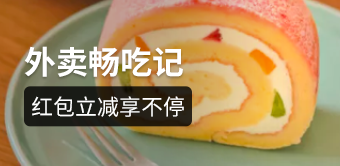
<style>
.page{position:relative;width:340px;height:166px}
.page>*{position:absolute;margin:0}
.t1{font:32px "SourceHanSansCN-Bold";color:#ffffff}
.t2{font:22px "SourceHanSansCN-Regular";color:#ffffff}
</style>
<div class="page">
<p class="t1" style="left:24px;top:46px;width:159px;height:31px">外卖畅吃记</p>
<p class="t2" style="left:32px;top:96px;width:152px;height:21px">红包立减享不停</p>
</div>
